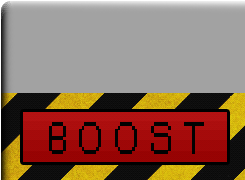
<style>
.page{position:relative;width:245px;height:180px;background:#a2a2a2}
.page>*{position:absolute;margin:0}
.t1{font:56px "rainyhearts";letter-spacing:0.18em;color:#020202;scale:0.8 1}
</style>
<div class="page">
<p class="t1" style="left:49px;top:122px;width:155px;height:32px">BOOST</p>
</div>
